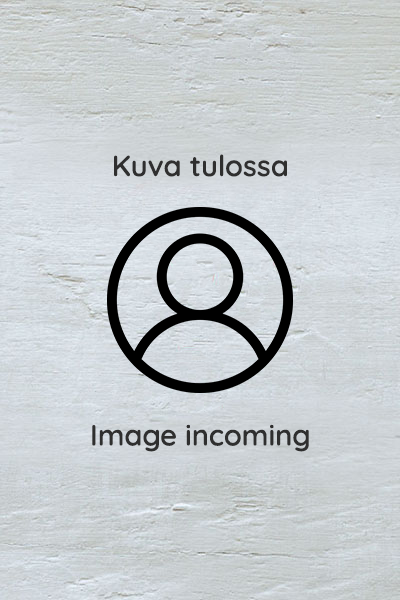
<style>
.page{position:relative;width:400px;height:600px}
.page>*{position:absolute;margin:0}
.t1{font:29.2px "Quicksand-SemiBold";color:#2f2f2f}
</style>
<div class="page">
<p class="t1" style="left:114px;top:154px;width:173px;height:23px">Kuva tulossa</p>
<p class="t1" style="left:92px;top:424px;width:217px;height:28px">Image incoming</p>
</div>
